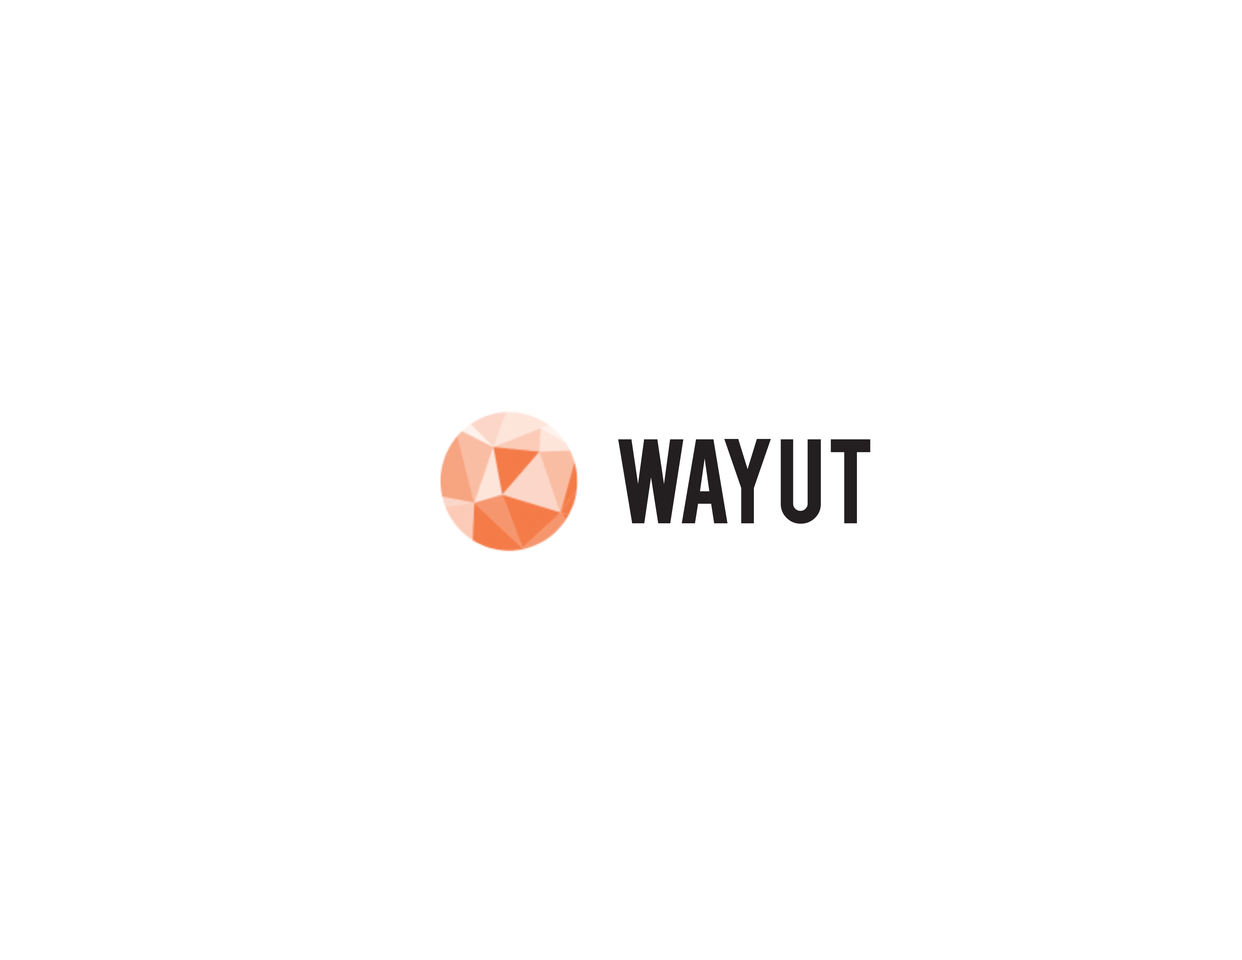
<style>
.page{position:relative;width:1242px;height:960px;background:#ffffff}
.page>*{position:absolute;margin:0}
.t1{font:94px "Bebas";color:#231f20}
</style>
<div class="page">
<p class="t1" style="left:618px;top:439px;width:253px;height:85px">WAYUT</p>
</div>
